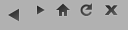
<style>
.page{position:relative;width:128px;height:30px;background:#b1b1b1}
.page>*{position:absolute;margin:0}
.t1{font:12.6px "BorisBlackBloxx";color:#424242}
</style>
<div class="page">
<p class="t1" style="left:105px;top:5px;width:13px;height:10px">X</p>
</div>
